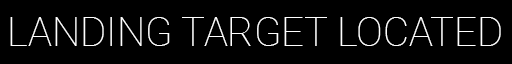
<style>
.page{position:relative;width:512px;height:64px;background:#000000}
.page>*{position:absolute;margin:0}
.t1{font:40px "Roboto-Thin";color:#ffffff;text-transform:uppercase}
</style>
<div class="page">
<p class="t1" style="left:10px;top:17px;width:491px;height:29px">LANDING TARGET LOCATED</p>
</div>
